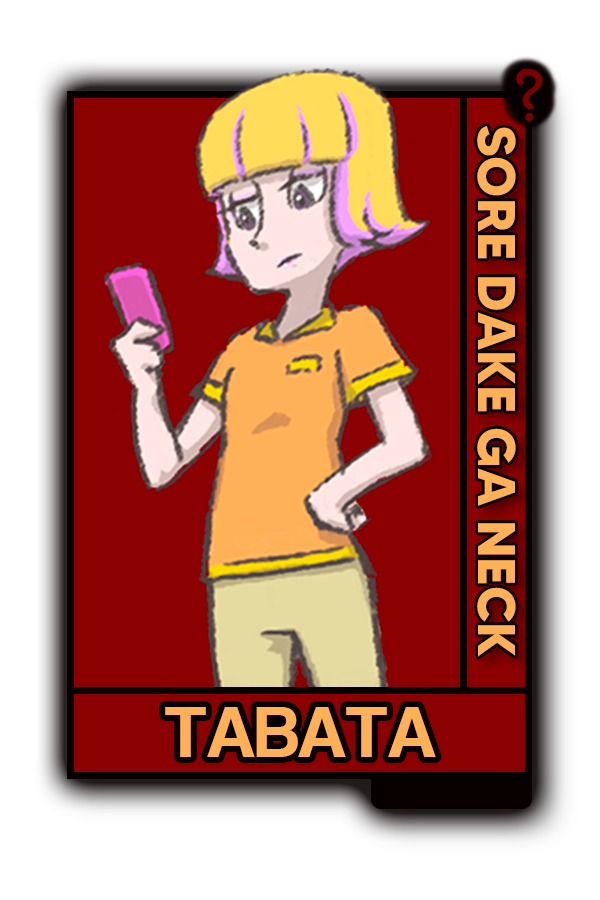
<style>
.page{position:relative;width:600px;height:900px;background:#8b0000}
.page>*{position:absolute;margin:0}
.t1{font:52.7px "MADETOMMY-Bold";color:#ffb158}
.t2{font:75px "CoolveticaRg-Regular";color:#ffb158}
</style>
<div class="page">
<p class="t1" style="left:477px;top:126px;width:39px;height:531px;rotate:90deg">SORE DAKE GA NECK</p>
<p class="t2" style="left:165px;top:707px;width:271px;height:50px">TABATA</p>
</div>
